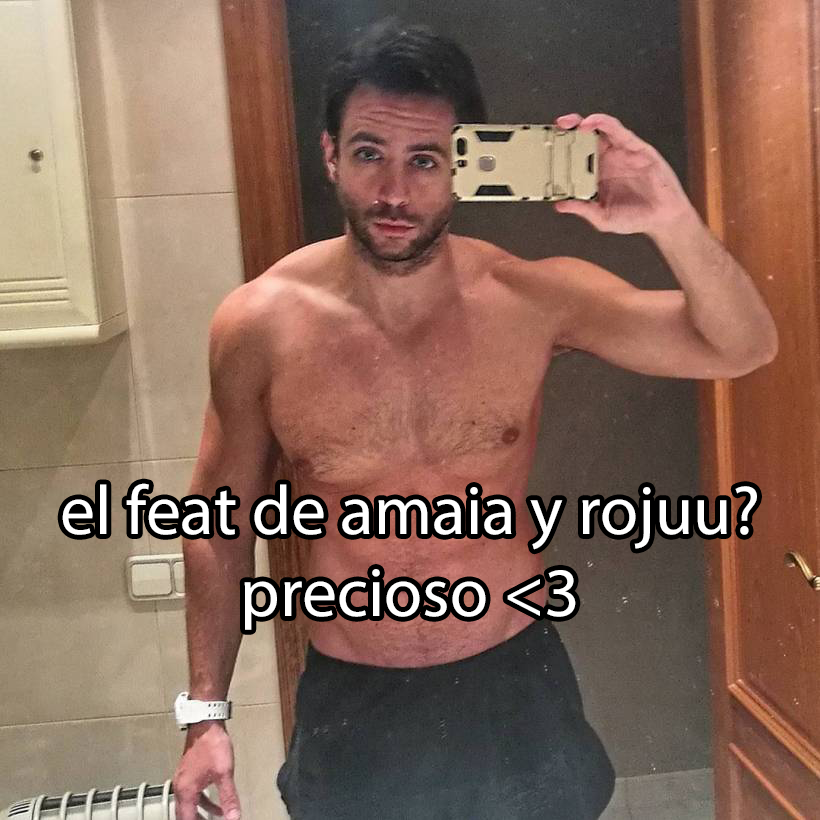
<style>
.page{position:relative;width:820px;height:820px}
.page>*{position:absolute;margin:0}
.t1{font:69.6px "MyriadPro-Regular";color:#ffffff}
</style>
<div class="page">
<p class="t1" style="left:62px;top:483px;width:695px;height:147px;text-align:center">el feat de amaia y rojuu?<br>precioso &lt;3</p>
</div>
